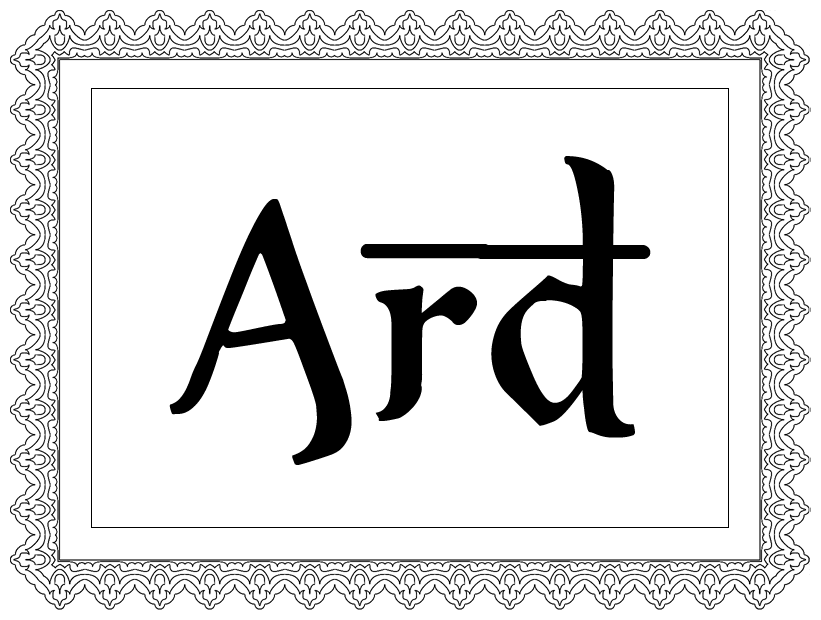
<style>
.page{position:relative;width:821px;height:620px;background:#ffffff}
.page>*{position:absolute;margin:0}
.t1{font:300px "XXIIARABIAN-ONENIGHTSTAND-Bold";color:#000000}
</style>
<div class="page">
<p class="t1" style="left:169px;top:156px;width:482px;height:309px">Ard</p>
</div>
